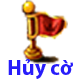
<style>
.page{position:relative;width:80px;height:80px;background:#ffffff}
.page>*{position:absolute;margin:0}
.t1{font:15.9px "MyriadPro-Bold";color:#271cfa}
</style>
<div class="page">
<p class="t1" style="left:8px;top:59px;width:65px;height:20px">Hủy cờ</p>
</div>
